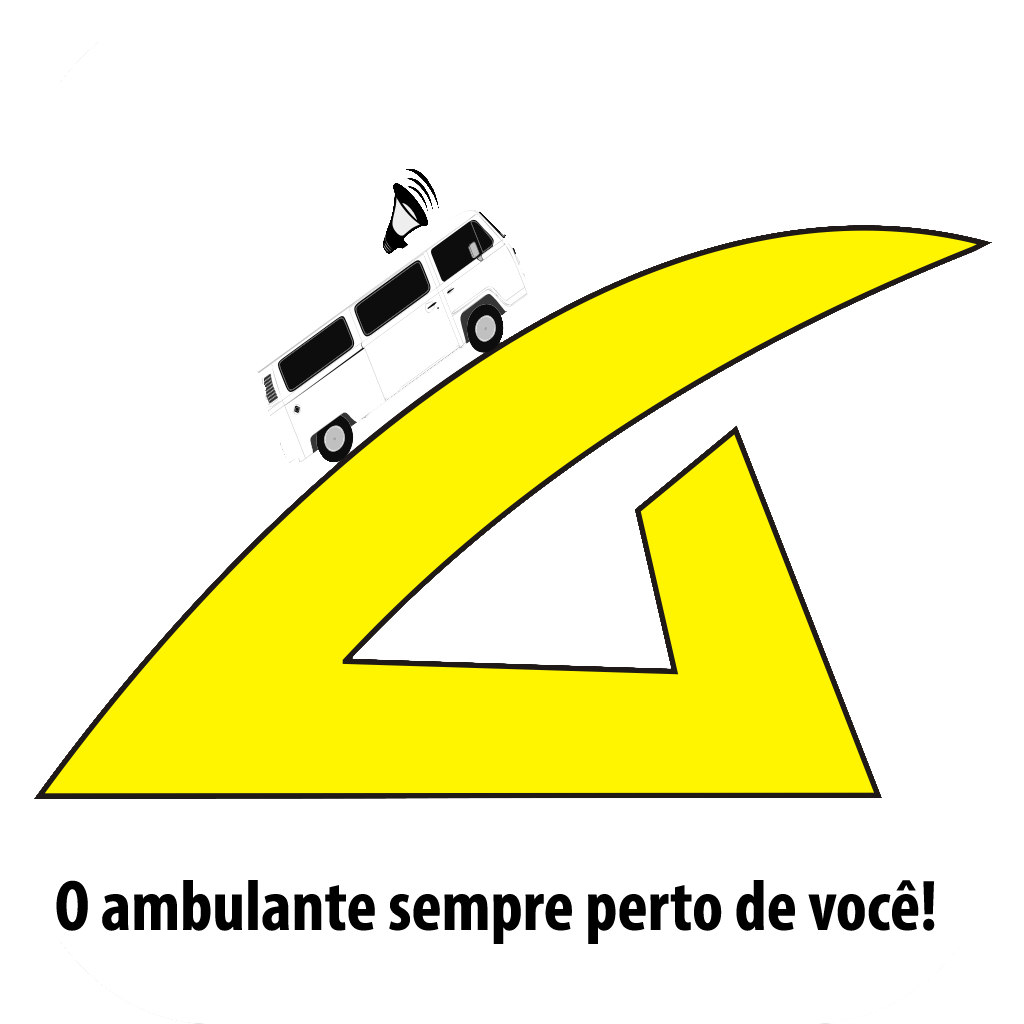
<style>
.page{position:relative;width:1024px;height:1024px;background:#ffffff}
.page>*{position:absolute;margin:0}
.t1{font:72px "MyriadPro-BoldCond";color:#000000}
</style>
<div class="page">
<p class="t1" style="left:56px;top:880px;width:879px;height:64px">O ambulante sempre perto de você!</p>
</div>
